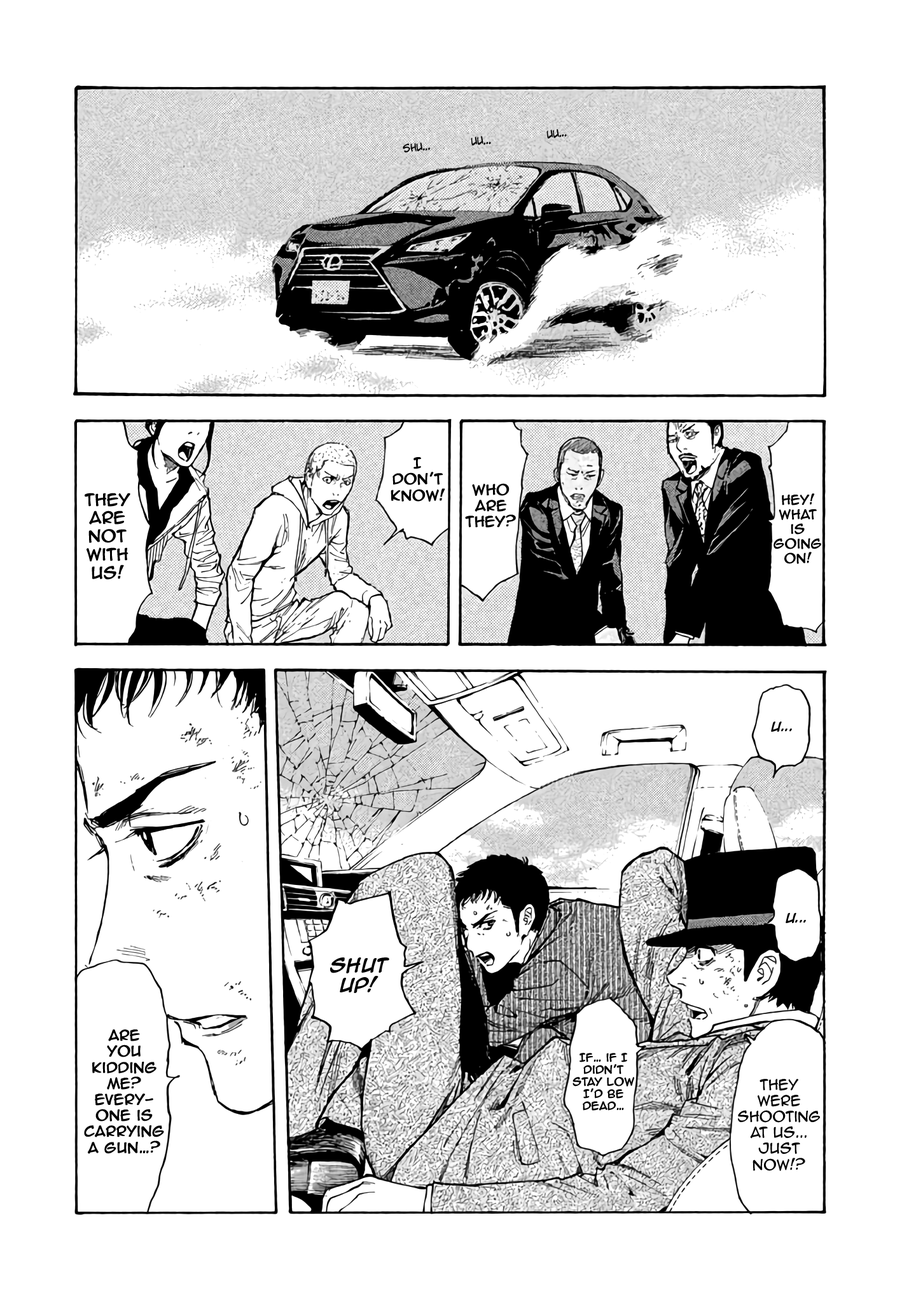
<style>
.page{position:relative;width:916px;height:1302px;background:#ffffff}
.page>*{position:absolute;margin:0}
.t1{font:10.8px "AdamWarrenpro";color:#000000}
.t2{font:13.4px "AnimeAce2.0BB";color:#000000;font-weight:bold}
.t3{font:15.3px "AnimeAce2.0BB";color:#000000;font-weight:bold}
.t4{font:12.1px "AnimeAce2.0BB";color:#000000;font-weight:bold}
.t5{font:11.4px "AnimeAce2.0BB-Bold";color:#000000}
.t6{font:16.5px "AnimeAce2.0BB-Bold";color:#000000}
.t7{font:10.2px "AnimeAce2.0BB";color:#000000;font-weight:bold}
.t8{font:13.4px "AnimeAce2.0BB";color:#000000}
</style>
<div class="page">
<p class="t1" style="left:403px;top:129px;width:164px;height:24px;rotate:-6deg">Shu...              uu...                   uu...</p>
<p class="t2" style="left:390px;top:457px;width:55px;height:45px;text-align:center">I<br>don’t<br>know!</p>
<p class="t2" style="left:465px;top:483px;width:51px;height:45px;text-align:center">Who are they?</p>
<p class="t3" style="left:85px;top:493px;width:45px;height:87px;text-align:center">they<br>are<br>Not<br>With<br>US!</p>
<p class="t4" style="left:773px;top:493px;width:48px;height:71px;text-align:center">HEY! What is going on!</p>
<p class="t5" style="left:771px;top:722px;width:21px;height:10px">U...</p>
<p class="t5" style="left:785px;top:913px;width:21px;height:10px">U...</p>
<p class="t6" style="left:329px;top:958px;width:60px;height:35px;text-align:center">Shut<br>UP!</p>
<p class="t2" style="left:84px;top:1029px;width:80px;height:125px;text-align:center">Are<br>you<br>kidding<br>me?<br>every-<br>one is<br>carrying<br>a gun…?</p>
<p class="t7" style="left:572px;top:1053px;width:62px;height:58px;text-align:center">If… if I<br>didn’t<br>stay low<br>I’d be<br>dead…</p>
<p class="t8" style="left:738px;top:1079px;width:82px;height:92px;text-align:center">they<br>were<br>shooting<br>at us...<br>Just<br>Now!?</p>
</div>
